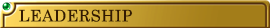
<style>
.page{position:relative;width:272px;height:28px}
.page>*{position:absolute;margin:0}
.t1{font:16px "CenturySchoolbook";letter-spacing:0.025em;color:#321a02}
</style>
<div class="page">
<p class="t1" style="left:19px;top:9px;width:114px;height:13px">LEADERSHIP</p>
</div>
